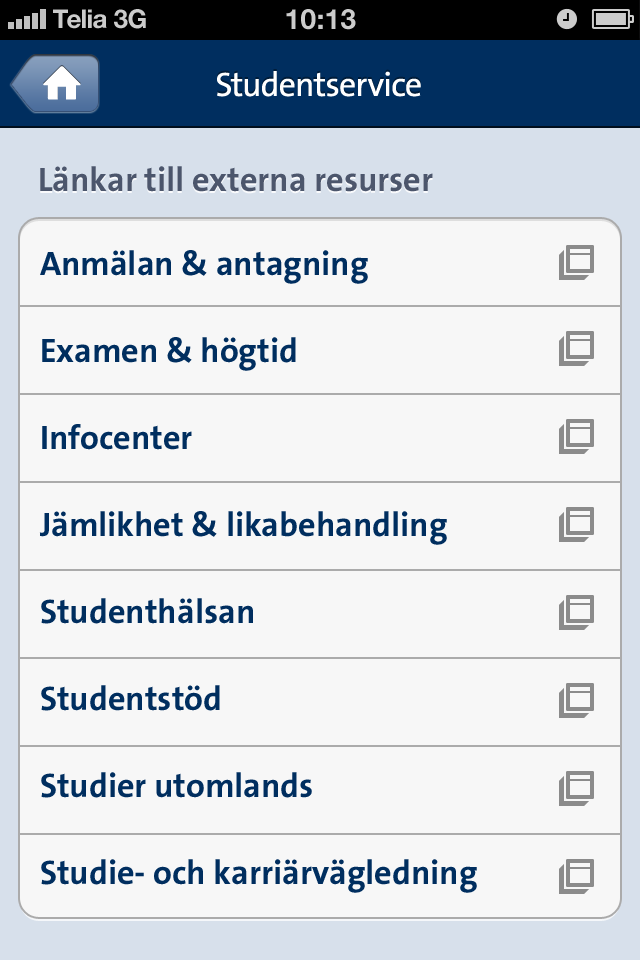
<style>
.page{position:relative;width:640px;height:960px;background:#f7f7f7}
.page>*{position:absolute;margin:0}
.t1{font:26px "HelveticaNeue-Bold";color:#cccccc}
.t2{font:26px "HelveticaNeue-Bold";color:#cccccc;text-transform:uppercase}
.t3{font:28px "HelveticaNeue-Bold";color:#cccccc;text-transform:uppercase}
.t4{font:34px "TheSansB-W5Plain";letter-spacing:-0.015em;color:#ffffff}
.t5{font:34px "TheSansB-W7Bold";color:#4c566c}
.t6{font:34px/87px "TheSansB-W7Bold";color:#002e5f}
</style>
<div class="page">
<p class="t1" style="left:53px;top:9px;width:54px;height:20px">Telia</p>
<p class="t2" style="left:114px;top:9px;width:32px;height:20px">3G</p>
<p class="t3" style="left:286px;top:9px;width:70px;height:21px">10:13</p>
<p class="t4" style="left:217px;top:71px;width:204px;height:26px">Studentservice</p>
<p class="t5" style="left:40px;top:166px;width:393px;height:26px">Länkar till externa resurser</p>
<p class="t6" style="left:39px;top:250px;width:438px;height:643px">Anmälan &amp; antagning<br>Examen &amp; högtid<br>Infocenter<br>Jämlikhet &amp; likabehandling<br>Studenthälsan<br>Studentstöd<br>Studier utomlands<br>Studie- och karriärvägledning</p>
</div>
